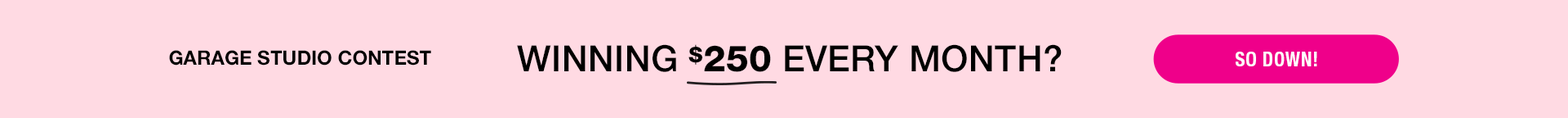
<style>
.page{position:relative;width:1568px;height:118px;background:#ffdae3}
.page>*{position:absolute;margin:0}
.t1{font:19.6px "HelveticaNeueLTStd-Bd";color:#000000;text-transform:uppercase}
.t2{font:35.9px "HelveticaNeueLTStd-Md";letter-spacing:0.01em;color:#000000;text-transform:uppercase}
.t3{font:21.6px "HelveticaNeueLTStd-Hv";letter-spacing:0.01em;color:#000000;text-transform:uppercase}
.t4{font:35.9px "HelveticaNeueLTStd-Hv";letter-spacing:0.01em;color:#000000;text-transform:uppercase}
.t5{font:19.6px "HelveticaNeueLTStd-BdCn";letter-spacing:0.025em;color:#fefefe;text-transform:uppercase}
</style>
<div class="page">
<p class="t1" style="left:169px;top:50px;width:262px;height:15px">Garage STUDIO CONTEST</p>
<p class="t2" style="left:517px;top:44px;width:545px;height:28px">Winning <span class="t3">$</span><span class="t4">250</span> every month?</p>
<p class="t5" style="left:1236px;top:51px;width:81px;height:15px">So Down!</p>
</div>
